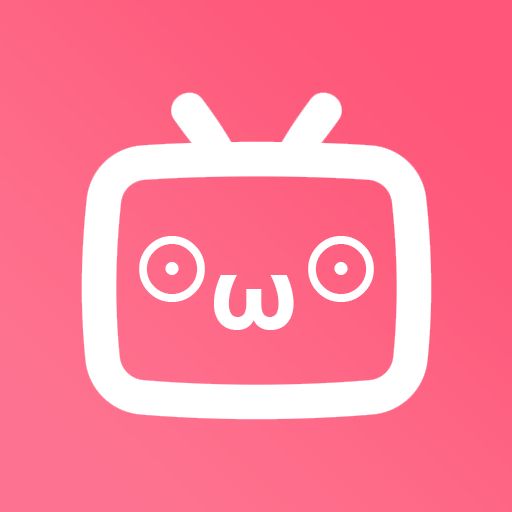
<style>
.page{position:relative;width:512px;height:512px}
.page>*{position:absolute;margin:0}
.t1{font:100px "MicrosoftYaHei-Bold";letter-spacing:-0.1em;color:#ffffff}
</style>
<div class="page">
<p class="t1" style="left:139px;top:236px;width:235px;height:66px">⊙    ⊙</p>
<p class="t1" style="left:214px;top:275px;width:80px;height:55px">ω</p>
</div>
